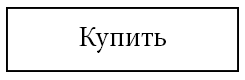
<style>
.page{position:relative;width:245px;height:80px;background:#ffffff}
.page>*{position:absolute;margin:0}
.t1{font:28.7px "MinionPro-Regular";color:#000000}
</style>
<div class="page">
<p class="t1" style="left:79px;top:27px;width:87px;height:26px">Купить</p>
</div>
